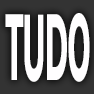
<style>
.page{position:relative;width:94px;height:94px;background:#fffeff}
.page>*{position:absolute;margin:0}
.t1{font:84px "RodinPro-EB";letter-spacing:-0.05em;color:#fffeff;scale:0.35 1}
</style>
<div class="page">
<p class="t1" style="left:5px;top:13px;width:85px;height:69px">TUDO</p>
</div>
